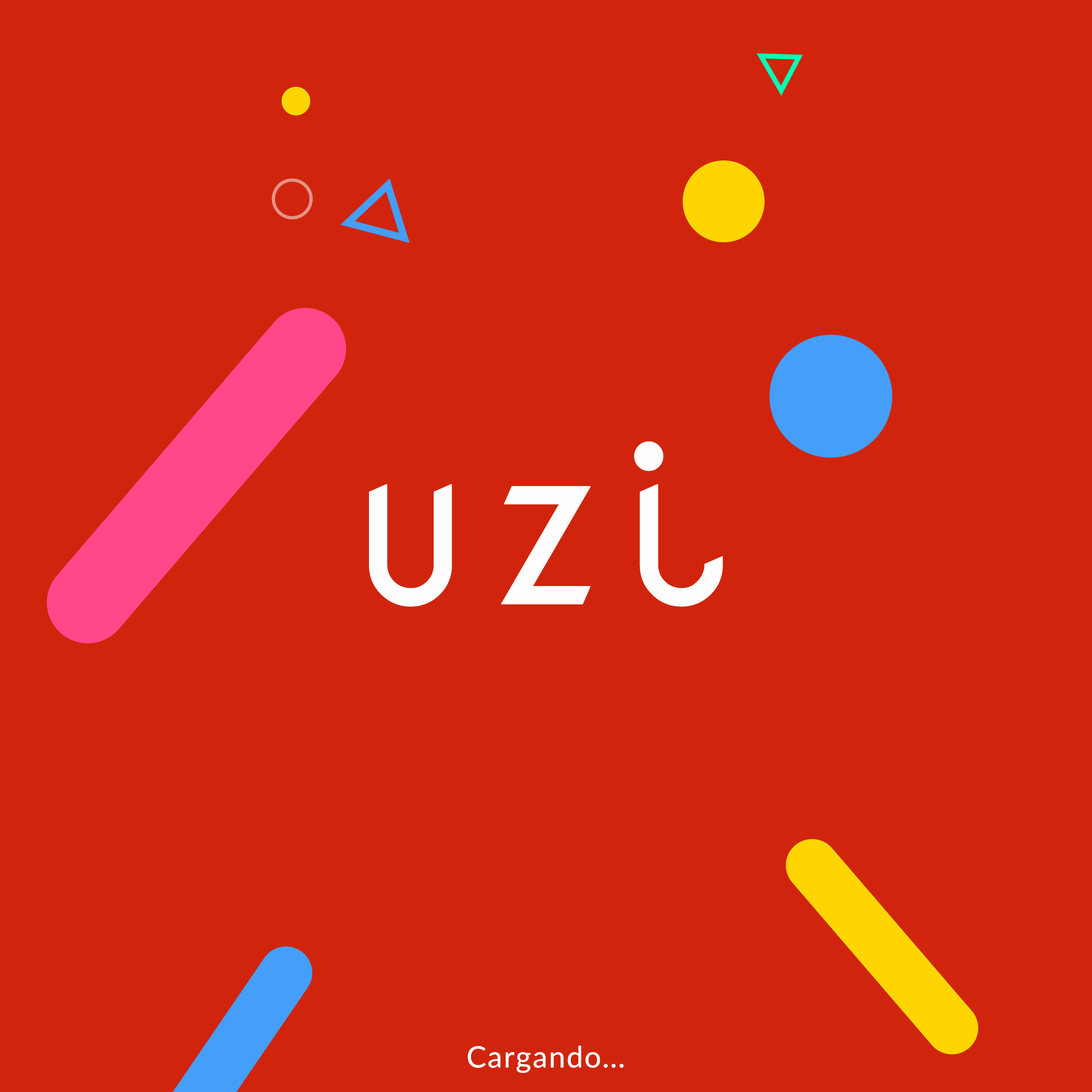
<style>
.page{position:relative;width:1092px;height:1092px;background:#d0250c}
.page>*{position:absolute;margin:0}
.t1{font:222.7px "NovaMono";letter-spacing:0.02em;color:#fffefe;font-weight:bold}
.t2{font:29.5px "Lato-Regular";letter-spacing:0.02em;color:#fffefe;font-weight:bold}
</style>
<div class="page">
<p class="t1" style="left:369px;top:441px;width:354px;height:166px">uzi</p>
<p class="t2" style="left:468px;top:1046px;width:156px;height:27px">Cargando...</p>
</div>
